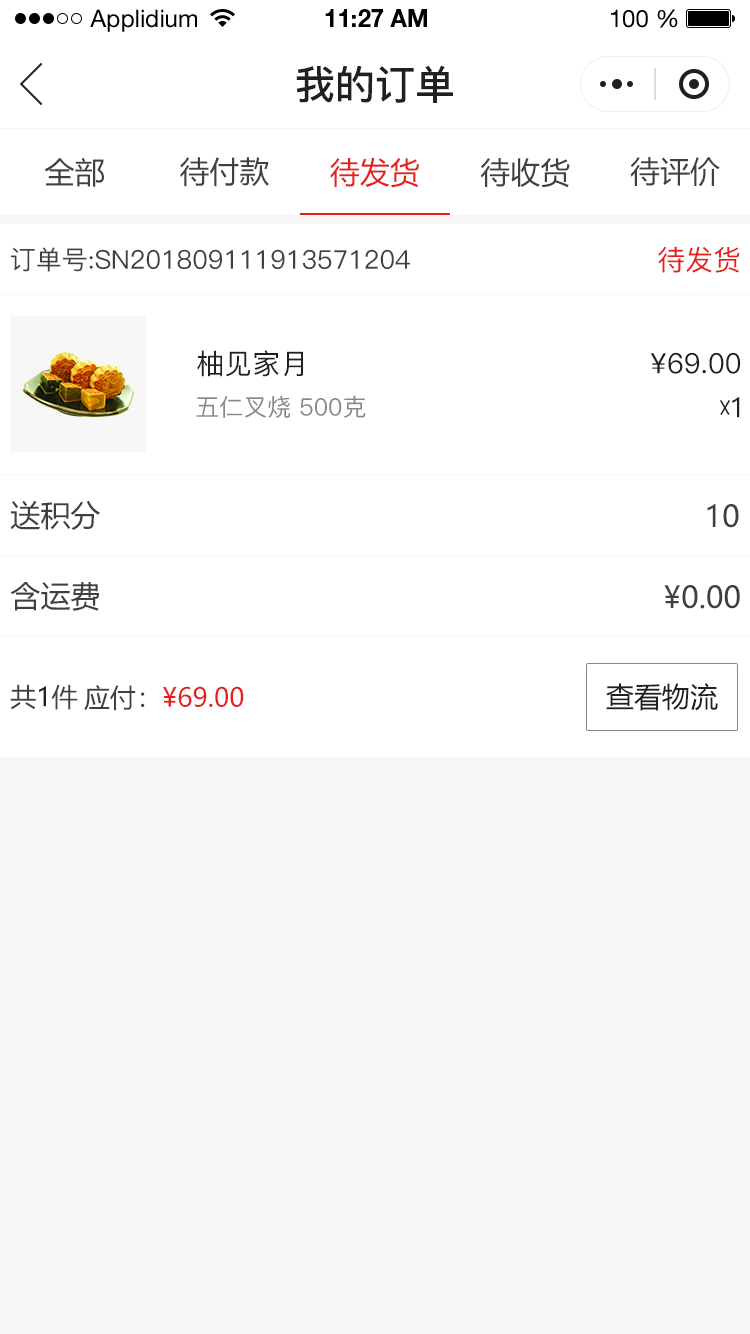
<style>
.page{position:relative;width:750px;height:1334px;background:#ffffff}
.page>*{position:absolute;margin:0}
.t1{font:24px "HelveticaNeueLTStd-Roman";color:#000000}
.t2{font:24px "HelveticaNeueLTStd-Bd";color:#000000}
.t3{font:40px "PingFang-SC-Bold";color:#202020;text-transform:uppercase}
.t4{font:30px "MicrosoftYaHei";color:#404040;text-transform:uppercase}
.t5{font:30px "MicrosoftYaHei";color:#e61f18;text-transform:uppercase}
.t6{font:28px "PingFang-SC-Medium";color:#e61f18;text-transform:uppercase}
.t7{font:26px "PingFang-SC-Medium";color:#404040;text-transform:uppercase}
.t8{font:28px "PingFang-SC-Medium";color:#202020;text-transform:uppercase}
.t9{font:24px "PingFang-SC-Medium";color:#888888;text-transform:uppercase}
.t10{font:26px "MicrosoftYaHei";color:#404040;text-transform:uppercase}
.t11{font:26px "MicrosoftYaHei";color:#202020;text-transform:uppercase}
.t12{font:26px "MicrosoftYaHei";color:#e61f18;text-transform:uppercase}
.t13{font:28px "MicrosoftYaHei";color:#202020;text-transform:uppercase}
</style>
<div class="page">
<p class="t1" style="left:90px;top:9px;width:107px;height:23px">Applidium</p>
<p class="t2" style="left:325px;top:9px;width:102px;height:18px">11:27 AM</p>
<p class="t1" style="left:611px;top:9px;width:67px;height:19px">100 %</p>
<p class="t3" style="left:296px;top:65px;width:157px;height:38px">我的订单</p>
<p class="t4" style="left:44px;top:157px;width:60px;height:30px">全部</p>
<p class="t4" style="left:180px;top:157px;width:89px;height:30px">待付款</p>
<p class="t5" style="left:330px;top:157px;width:89px;height:31px">待发货</p>
<p class="t4" style="left:480px;top:158px;width:90px;height:30px">待收货</p>
<p class="t4" style="left:630px;top:157px;width:90px;height:30px">待评价</p>
<p class="t6" style="left:658px;top:246px;width:82px;height:27px">待发货</p>
<p class="t7" style="left:11px;top:247px;width:399px;height:25px">订单号:sn201809111913571204</p>
<p class="t8" style="left:197px;top:350px;width:106px;height:27px">柚见家月</p>
<p class="t8" style="left:650px;top:352px;width:91px;height:22px">¥69.00</p>
<p class="t9" style="left:196px;top:395px;width:170px;height:23px">五仁叉烧 500克</p>
<p class="t8" style="left:732px;top:397px;width:8px;height:21px">1</p>
<p class="t4" style="left:10px;top:500px;width:90px;height:30px">送积分</p>
<p class="t4" style="left:707px;top:504px;width:32px;height:24px">10</p>
<p class="t4" style="left:10px;top:582px;width:89px;height:29px">含运费</p>
<p class="t4" style="left:664px;top:585px;width:76px;height:24px">¥0.00</p>
<p class="t10" style="left:10px;top:684px;width:68px;height:26px">共<span class="t11">1</span>件</p>
<p class="t12" style="left:84px;top:685px;width:160px;height:26px"><span class="t10">应付：</span>¥69.00</p>
<p class="t13" style="left:606px;top:683px;width:112px;height:28px">查看物流</p>
</div>
